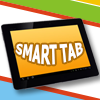
<style>
.page{position:relative;width:100px;height:100px}
.page>*{position:absolute;margin:0}
.t1{font:11.7px "Tahoma-Bold";color:#ffffff}
</style>
<div class="page">
<p class="t1" style="left:15px;top:42px;width:68px;height:23px">SMART TAB</p>
</div>
